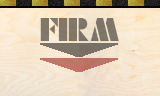
<style>
.page{position:relative;width:160px;height:96px}
.page>*{position:absolute;margin:0}
.t1{font:32px "Dayton";color:#807769}
</style>
<div class="page">
<p class="t1" style="left:40px;top:17px;width:79px;height:24px">FIRM</p>
</div>
